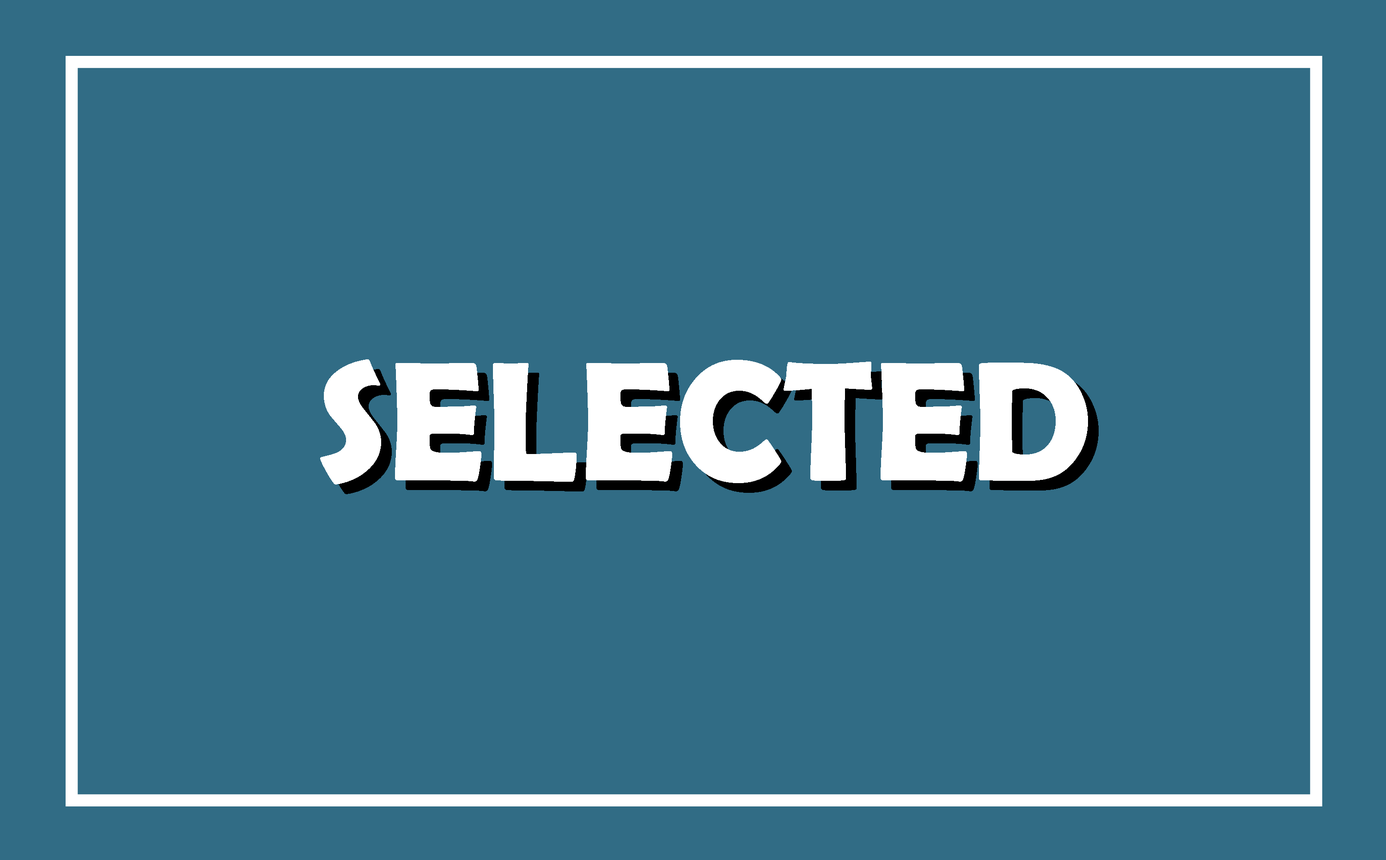
<style>
.page{position:relative;width:1386px;height:860px;background:#316c85}
.page>*{position:absolute;margin:0}
.t1{font:171.9px "BerlinSansFBDemi-Bold";color:#ffffff}
</style>
<div class="page">
<p class="t1" style="left:320px;top:359px;width:768px;height:126px">SELECTED</p>
</div>
